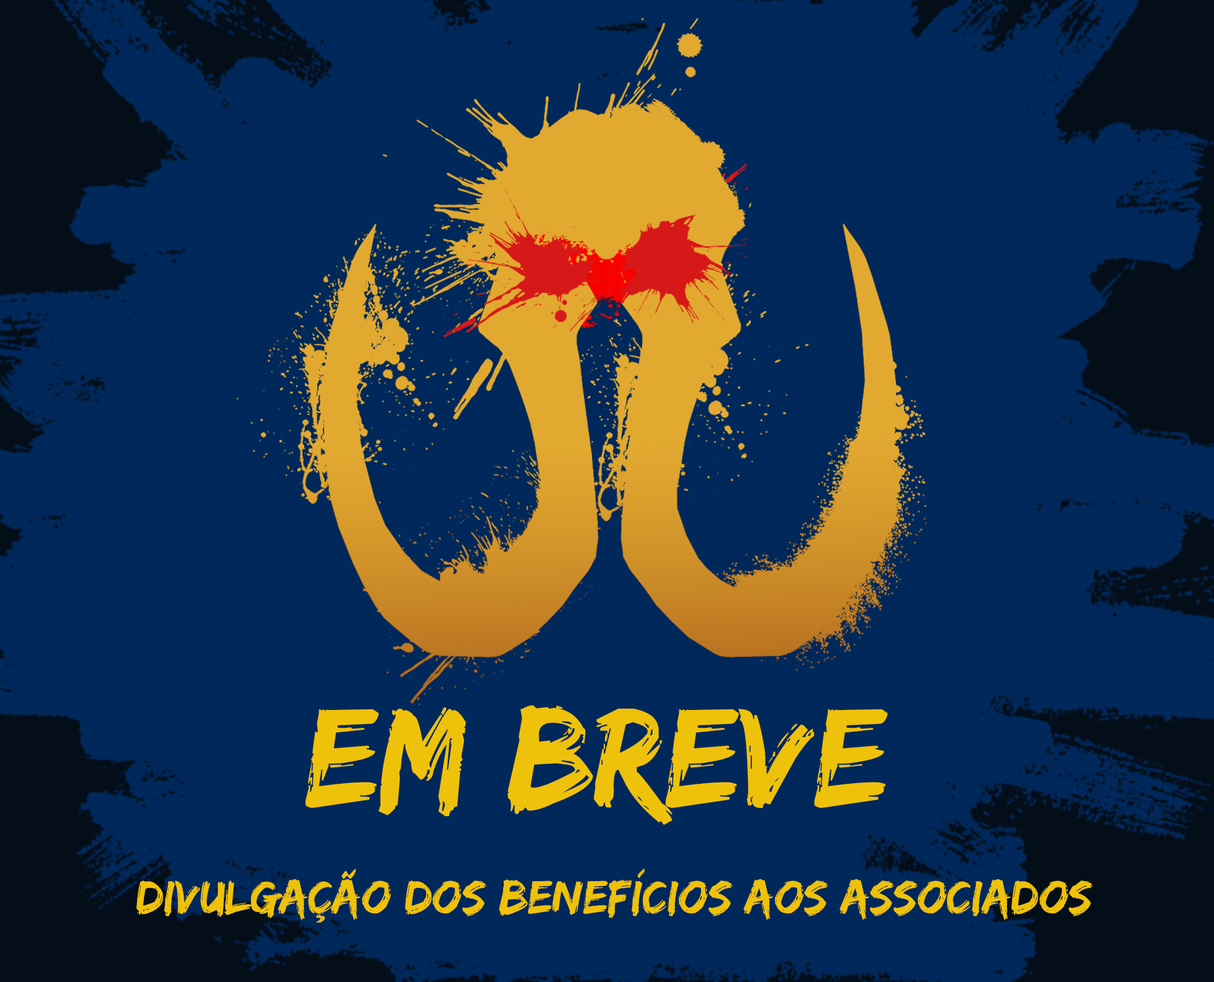
<style>
.page{position:relative;width:1214px;height:982px;background:#00285a}
.page>*{position:absolute;margin:0}
.t1{font:146.9px "EdoSZ";color:#eec20a}
.t2{font:49px "EdoSZ";color:#eec20a}
</style>
<div class="page">
<p class="t1" style="left:306px;top:705px;width:582px;height:120px">EM BREVE</p>
<p class="t2" style="left:136px;top:868px;width:957px;height:55px">Divulgação dos benefícios aos associados</p>
</div>
